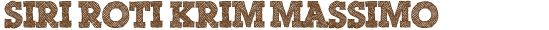
<style>
.page{position:relative;width:549px;height:30px;background:#ffffff}
.page>*{position:absolute;margin:0}
.t1{font:36px "ScribbleBoxDEMO";color:#684121}
</style>
<div class="page">
<p class="t1" style="left:4px;top:0px;width:435px;height:29px">Siri Roti Krim Massimo</p>
</div>
